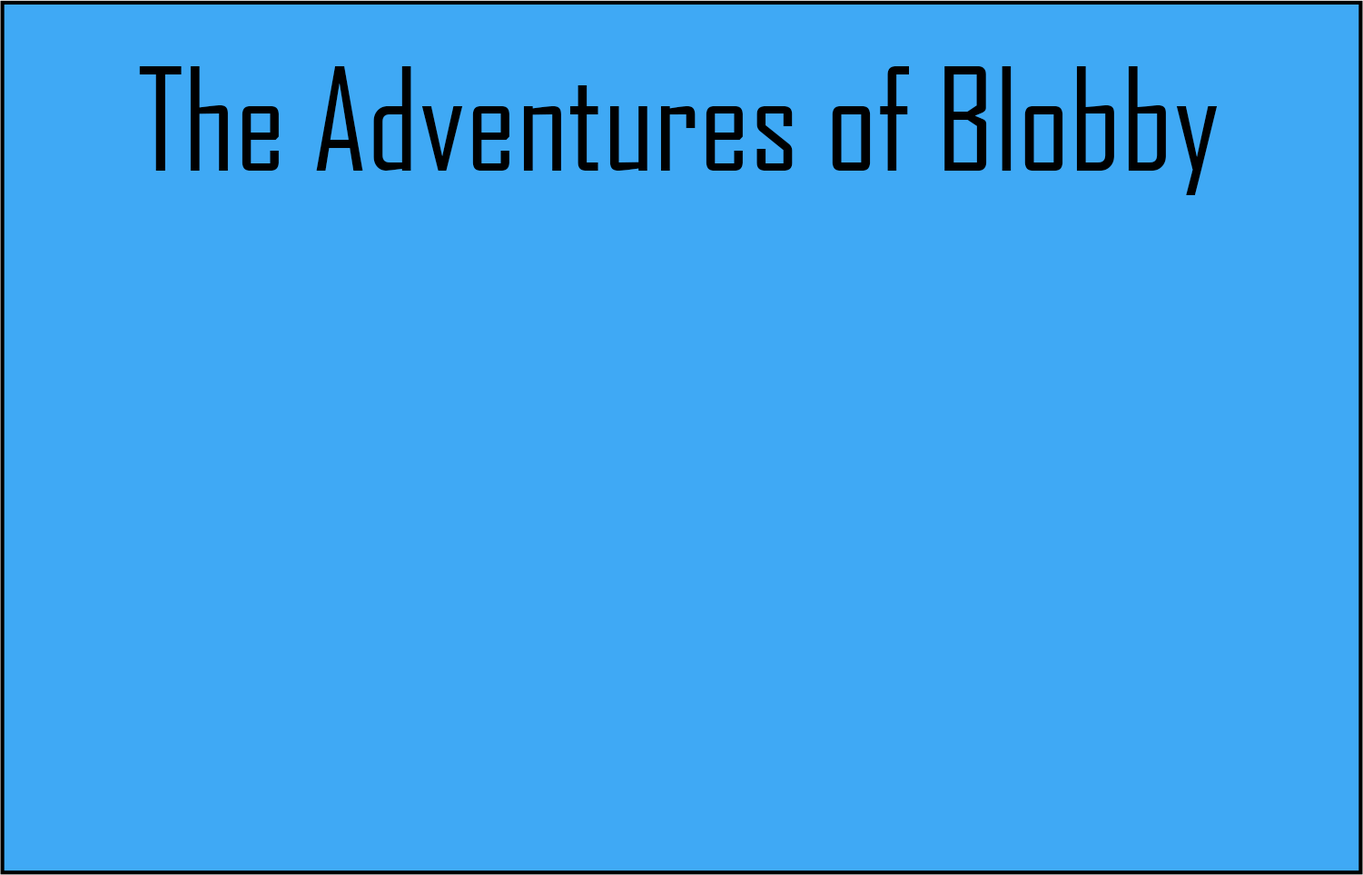
<style>
.page{position:relative;width:1363px;height:875px;background:#3fa9f5}
.page>*{position:absolute;margin:0}
.t1{font:136.2px "AgencyFB-Reg";color:#000000}
</style>
<div class="page">
<p class="t1" style="left:139px;top:66px;width:1078px;height:129px">The Adventures of Blobby</p>
</div>
